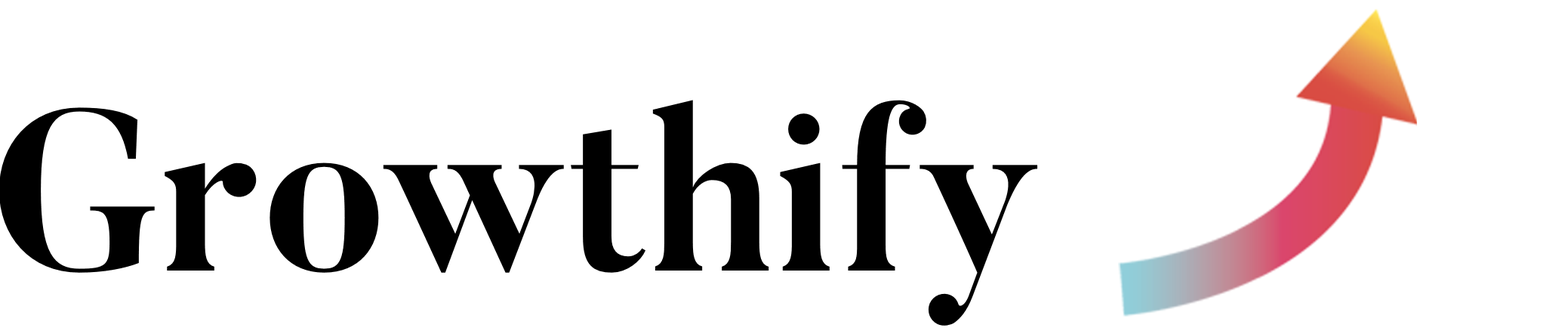
<style>
.page{position:relative;width:1568px;height:331px;background:#ffffff}
.page>*{position:absolute;margin:0}
.t1{font:228.3px "Butler-Bold";letter-spacing:0.006em;color:#000000}
</style>
<div class="page">
<p class="t1" style="left:0px;top:100px;width:1038px;height:225px">Growthify</p>
</div>
